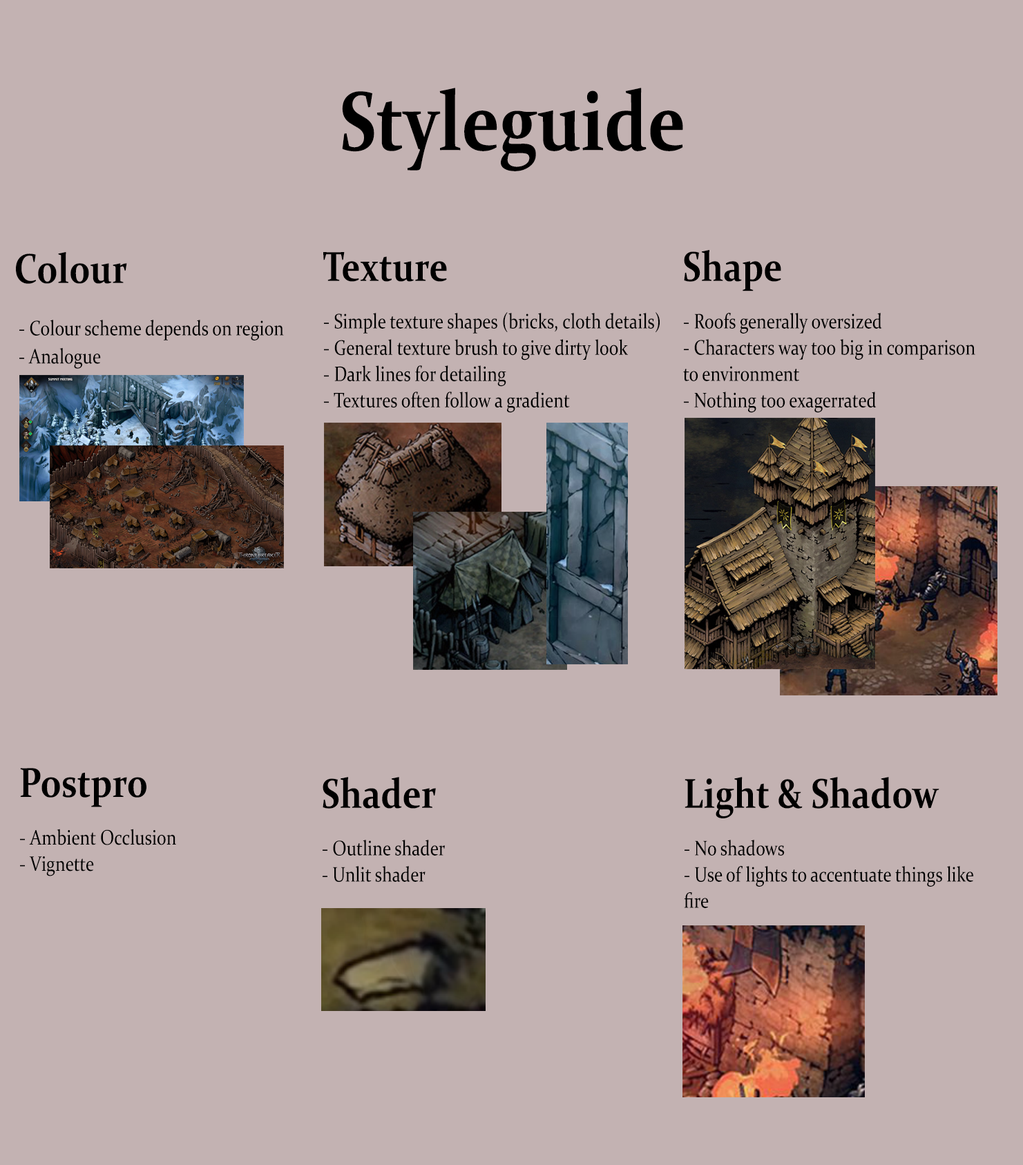
<style>
.page{position:relative;width:1023px;height:1165px;background:#c3b2b2}
.page>*{position:absolute;margin:0}
.t1{font:84.2px "Constantia-Bold";color:#000000;scale:0.83 1}
.t2{font:42.1px "Constantia-Bold";color:#000000;scale:0.83 1}
.t3{font:21px/26.3px "Constantia";color:#000000;scale:0.83 1}
.t4{font:21px/28.1px "Constantia";color:#000000;scale:0.83 1}
.t5{font:42px "Constantia-Bold";color:#000000;scale:0.83 1}
.t6{font:21px/26.2px "Constantia";color:#000000;scale:0.83 1}
</style>
<div class="page">
<p class="t1" style="left:342px;top:88px;width:341px;height:83px">Styleguide</p>
<p class="t2" style="left:16px;top:252px;width:111px;height:32px">Colour</p>
<p class="t2" style="left:323px;top:252px;width:124px;height:30px">Texture</p>
<p class="t2" style="left:684px;top:250px;width:97px;height:42px">Shape</p>
<p class="t3" style="left:324px;top:312px;width:336px;height:101px">- Simple texture shapes (bricks, cloth details)<br>- General texture brush to give dirty look<br>- Dark lines for detailing<br>- Textures often follow a gradient</p>
<p class="t3" style="left:683px;top:313px;width:292px;height:100px">- Roofs generally oversized<br>- Characters way too big in comparison<br>to environment<br>- Nothing too exagerrated</p>
<p class="t4" style="left:19px;top:320px;width:265px;height:49px">- Colour scheme depends on region<br>- Analogue</p>
<p class="t2" style="left:20px;top:768px;width:126px;height:40px">Postpro</p>
<p class="t5" style="left:323px;top:777px;width:113px;height:32px">Shader</p>
<p class="t5" style="left:685px;top:777px;width:255px;height:42px">Light &amp; Shadow</p>
<p class="t3" style="left:20px;top:829px;width:156px;height:48px">- Ambient Occlusion<br>- Vignette</p>
<p class="t6" style="left:323px;top:840px;width:122px;height:42px">- Outline shader<br>- Unlit shader</p>
<p class="t6" style="left:684px;top:840px;width:289px;height:68px">- No shadows<br>- Use of lights to accentuate things like<br>fire</p>
</div>
